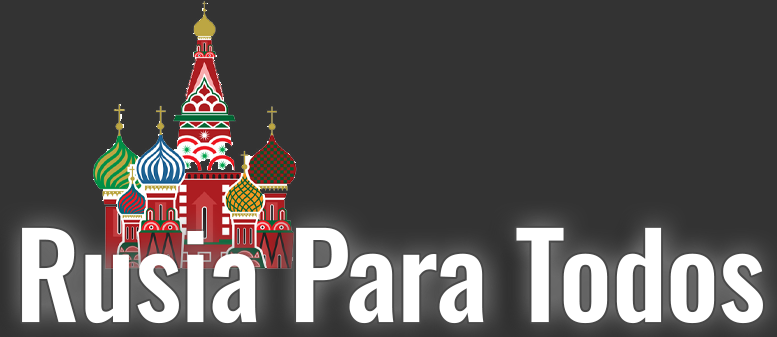
<style>
.page{position:relative;width:777px;height:337px;background:#333333}
.page>*{position:absolute;margin:0}
.t1{font:116.2px "Oswald-Medium";color:#ffffff;font-weight:bold}
</style>
<div class="page">
<p class="t1" style="left:22px;top:227px;width:741px;height:97px">Rusia Para Todos</p>
</div>
